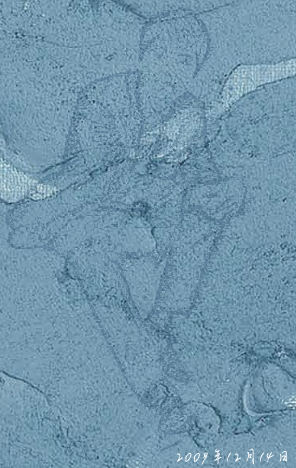
<style>
.page{position:relative;width:296px;height:468px}
.page>*{position:absolute;margin:0}
.t1{font:16px "liguofu";letter-spacing:0.02em;color:#ffffff}
</style>
<div class="page">
<p class="t1" style="left:177px;top:448px;width:110px;height:17px">2009年12月14日</p>
</div>
